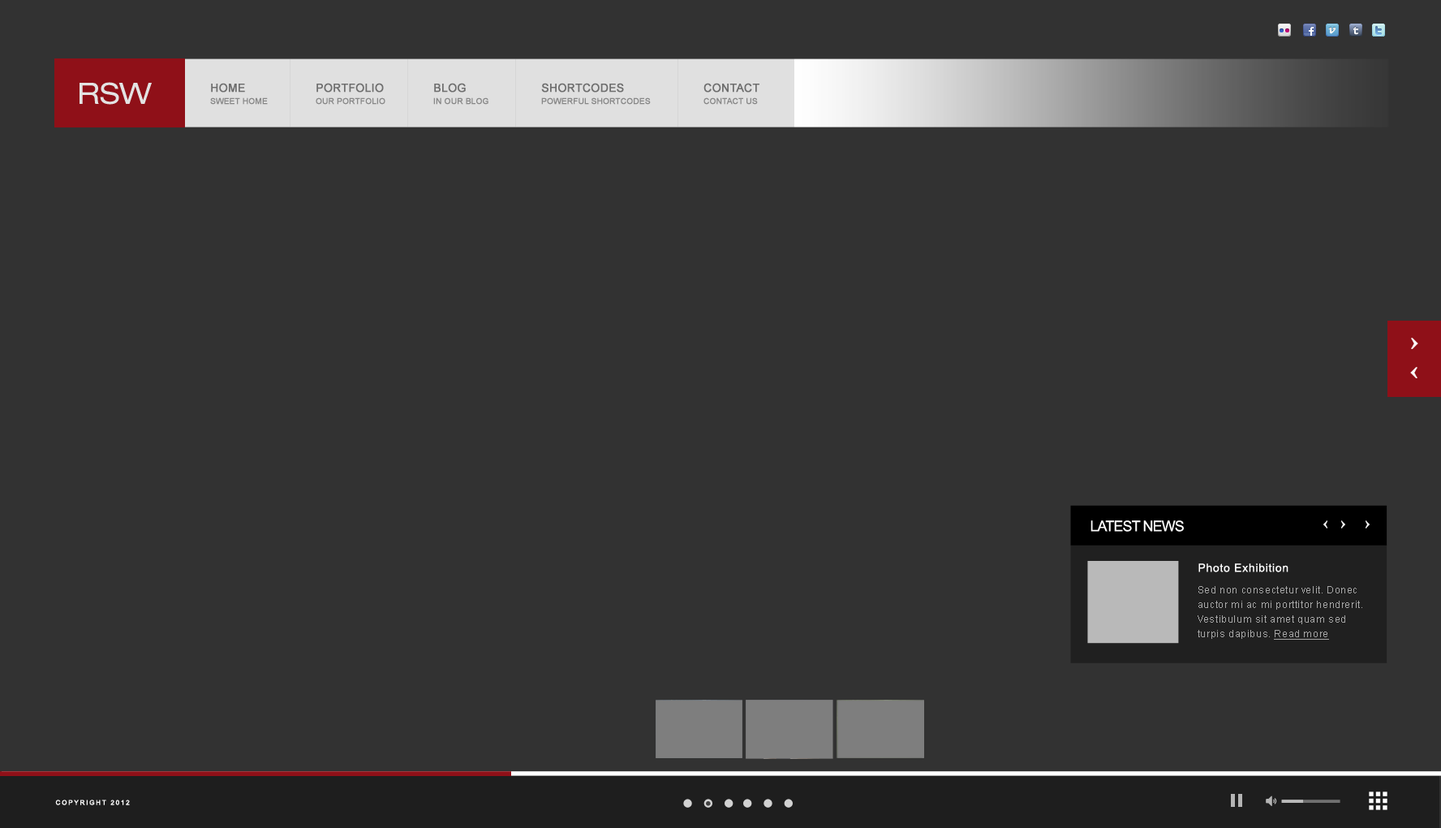
<style>
.page{position:relative;width:1441px;height:828px;background:#323232}
.page>*{position:absolute;margin:0}
.t1{font:29.5px "HelveticaNeueLTPro-Ex";color:#e3e3e3}
.t2{font:11.4px "ArialMT";color:#6e6e6e;text-transform:uppercase;font-weight:bold}
.t3{font:8.1px "ArialMT";color:#878787;text-transform:uppercase;font-weight:bold}
.t4{font:14.6px "ArialMT";letter-spacing:-0.05em;color:#ffffff;text-transform:uppercase}
.t5{font:11.4px "ArialMT";letter-spacing:0.05em;color:#ffffff}
.t6{font:9.7px/14.6px "ArialMT";letter-spacing:0.05em;color:#a6a6a6}
.t7{font:9.7px/14.6px "ArialMT";letter-spacing:0.05em;color:#a6a6a6;text-decoration:underline}
.t8{font:6.5px "ArialMT";letter-spacing:0.2em;color:#ffffff;text-transform:uppercase;font-weight:bold}
</style>
<div class="page">
<p class="t1" style="left:80px;top:82px;width:72px;height:23px">RSW</p>
<p class="t2" style="left:211px;top:83px;width:34px;height:9px">Home</p>
<p class="t2" style="left:316px;top:83px;width:68px;height:9px">portfolio</p>
<p class="t2" style="left:434px;top:83px;width:32px;height:9px">blog</p>
<p class="t2" style="left:541px;top:83px;width:83px;height:9px">shortcodes</p>
<p class="t2" style="left:703px;top:83px;width:56px;height:9px">contact</p>
<p class="t3" style="left:210px;top:97px;width:58px;height:8px">sweet home</p>
<p class="t3" style="left:316px;top:97px;width:69px;height:8px">our portfolio</p>
<p class="t3" style="left:433px;top:97px;width:55px;height:8px">in our blog</p>
<p class="t3" style="left:541px;top:97px;width:110px;height:8px">powerful shortcodes</p>
<p class="t3" style="left:703px;top:97px;width:55px;height:8px">contact us</p>
<p class="t4" style="left:1090px;top:520px;width:94px;height:11px">Latest News</p>
<p class="t5" style="left:1198px;top:563px;width:90px;height:9px">Photo Exhibition</p>
<p class="t6" style="left:1198px;top:586px;width:164px;height:53px">Sed non consectetur velit. Donec auctor mi ac mi porttitor hendrerit. Vestibulum sit amet quam sed turpis dapibus. <span class="t7">Read more<br><br></span>nisi vitae aliquam lobortis, turpis nisl fermentum augue</p>
<p class="t8" style="left:55px;top:799px;width:75px;height:6px">Copyright 2012</p>
</div>
